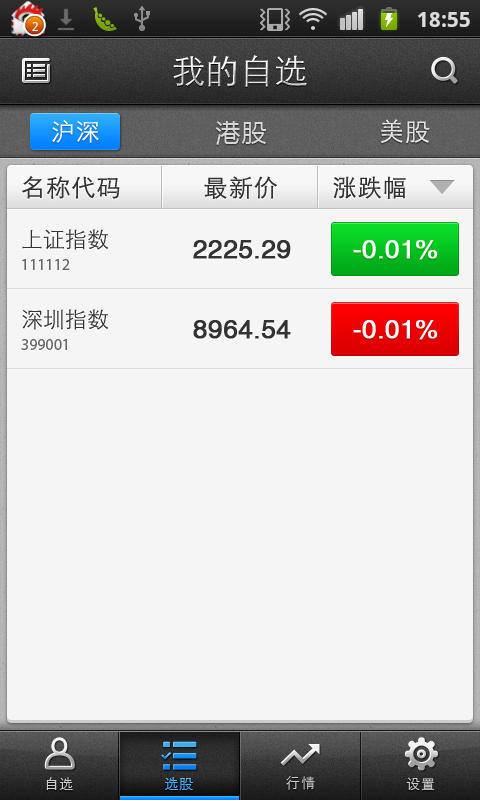
<style>
.page{position:relative;width:480px;height:800px;background:#f5f5f5}
.page>*{position:absolute;margin:0}
.t1{font:34px "STXihei";letter-spacing:0.005em;color:#ffffff}
.t2{font:24px "STXihei";letter-spacing:0.05em;color:#ffffff}
.t3{font:25px "MicrosoftYaHei";letter-spacing:0.05em;color:#d6d6d6}
.t4{font:25px "STXihei";letter-spacing:0.05em;color:#e3e3e3}
.t5{font:24px "STXihei";letter-spacing:0.05em;color:#333333}
.t6{font:22px "STXihei";color:#333333}
.t7{font:24.7px "HelveticaCE-Regular";color:#333333;font-weight:bold;scale:1.05 1}
.t8{font:24.7px "HelveticaCE-Regular";color:#ffffff;font-weight:bold;scale:1.05 1}
.t9{font:16px "HelveticaCE-Regular";color:#5c6370}
.t10{font:14px "STXihei";letter-spacing:0.05em;color:#cccccc}
.t11{font:14px "STXihei";letter-spacing:0.05em}
.t12{font:14px "STXihei";letter-spacing:0.1em;color:#cccccc}
</style>
<div class="page">
<p class="t1" style="left:173px;top:55px;width:134px;height:32px">我的自选</p>
<p class="t2" style="left:52px;top:120px;width:47px;height:23px">沪深</p>
<p class="t3" style="left:215px;top:121px;width:52px;height:24px">港股</p>
<p class="t4" style="left:380px;top:119px;width:50px;height:24px">美股</p>
<p class="t5" style="left:22px;top:176px;width:98px;height:23px">名称代码</p>
<p class="t5" style="left:204px;top:176px;width:73px;height:23px">最新价</p>
<p class="t5" style="left:333px;top:176px;width:73px;height:23px">涨跌幅</p>
<p class="t6" style="left:22px;top:229px;width:87px;height:21px">上证指数</p>
<p class="t7" style="left:193px;top:240px;width:98px;height:19px">2225.29</p>
<p class="t8" style="left:353px;top:240px;width:85px;height:20px">-0.01%</p>
<p class="t9" style="left:22px;top:259px;width:48px;height:11px">111112</p>
<p class="t6" style="left:22px;top:309px;width:87px;height:21px">深圳指数</p>
<p class="t7" style="left:193px;top:320px;width:98px;height:19px">8964.54</p>
<p class="t8" style="left:353px;top:320px;width:85px;height:20px">-0.01%</p>
<p class="t9" style="left:21px;top:339px;width:46px;height:11px">399001</p>
<p class="t10" style="left:46px;top:777px;width:27px;height:13px">自选</p>
<p class="t11" style="left:165px;top:777px;width:28px;height:14px">选股</p>
<p class="t11" style="left:165px;top:777px;width:28px;height:14px">选股</p>
<p class="t12" style="left:286px;top:776px;width:29px;height:14px">行情</p>
<p class="t10" style="left:406px;top:777px;width:29px;height:13px">设置</p>
</div>
